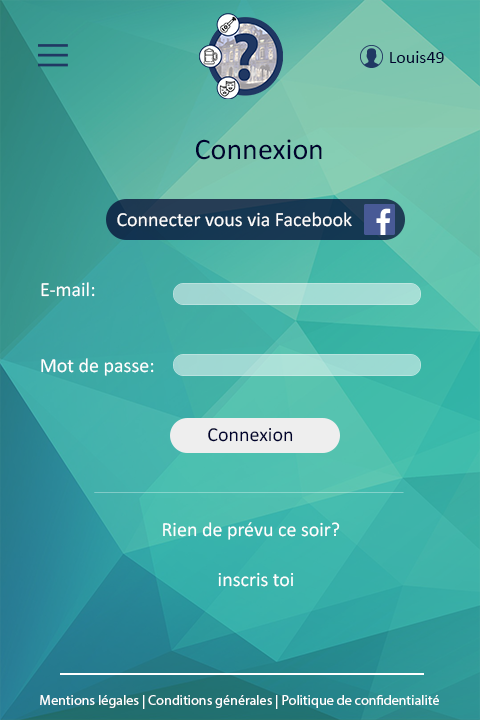
<style>
.page{position:relative;width:480px;height:720px}
.page>*{position:absolute;margin:0}
.t1{font:18px "Calibri";color:#00022e}
.t2{font:30.1px "Calibri";color:#00022e}
.t3{font:20px "Calibri";color:#fdfdfd}
.t4{font:20px "Calibri";color:#ffffff}
.t5{font:20px "Calibri";color:#00022e}
.t6{font:13.8px "MyriadPro-Regular";color:#ffffff}
</style>
<div class="page">
<p class="t1" style="left:390px;top:51px;width:54px;height:12px">Louis49</p>
<p class="t2" style="left:196px;top:139px;width:126px;height:21px">Connexion</p>
<p class="t3" style="left:117px;top:212px;width:235px;height:15px">Connecter vous via Facebook</p>
<p class="t4" style="left:41px;top:282px;width:54px;height:15px">E-mail:</p>
<p class="t4" style="left:41px;top:358px;width:113px;height:18px">Mot de passe:</p>
<p class="t5" style="left:208px;top:428px;width:85px;height:14px">Connexion</p>
<p class="t4" style="left:163px;top:522px;width:177px;height:18px">Rien de prévu ce soir?</p>
<p class="t4" style="left:218px;top:572px;width:75px;height:15px">inscris toi</p>
<p class="t6" style="left:40px;top:695px;width:399px;height:14px">Mentions légales | Conditions générales | Politique de confidentialité</p>
</div>
